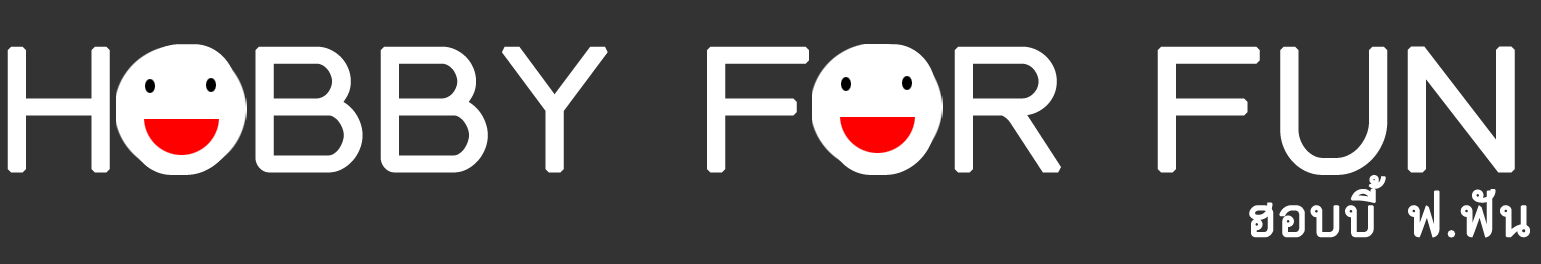
<style>
.page{position:relative;width:1541px;height:264px;background:#333333}
.page>*{position:absolute;margin:0}
.t1{font:250px "THBaijam";color:#ffffff;font-weight:bold}
.t2{font:75px "THBaijam";color:#ffffff;font-weight:bold}
</style>
<div class="page">
<p class="t1" style="left:7px;top:44px;width:1508px;height:131px">HOBBY FOR FUN</p>
<p class="t2" style="left:1249px;top:175px;width:281px;height:63px">ฮอบบี้ ฟ.ฟัน</p>
</div>
